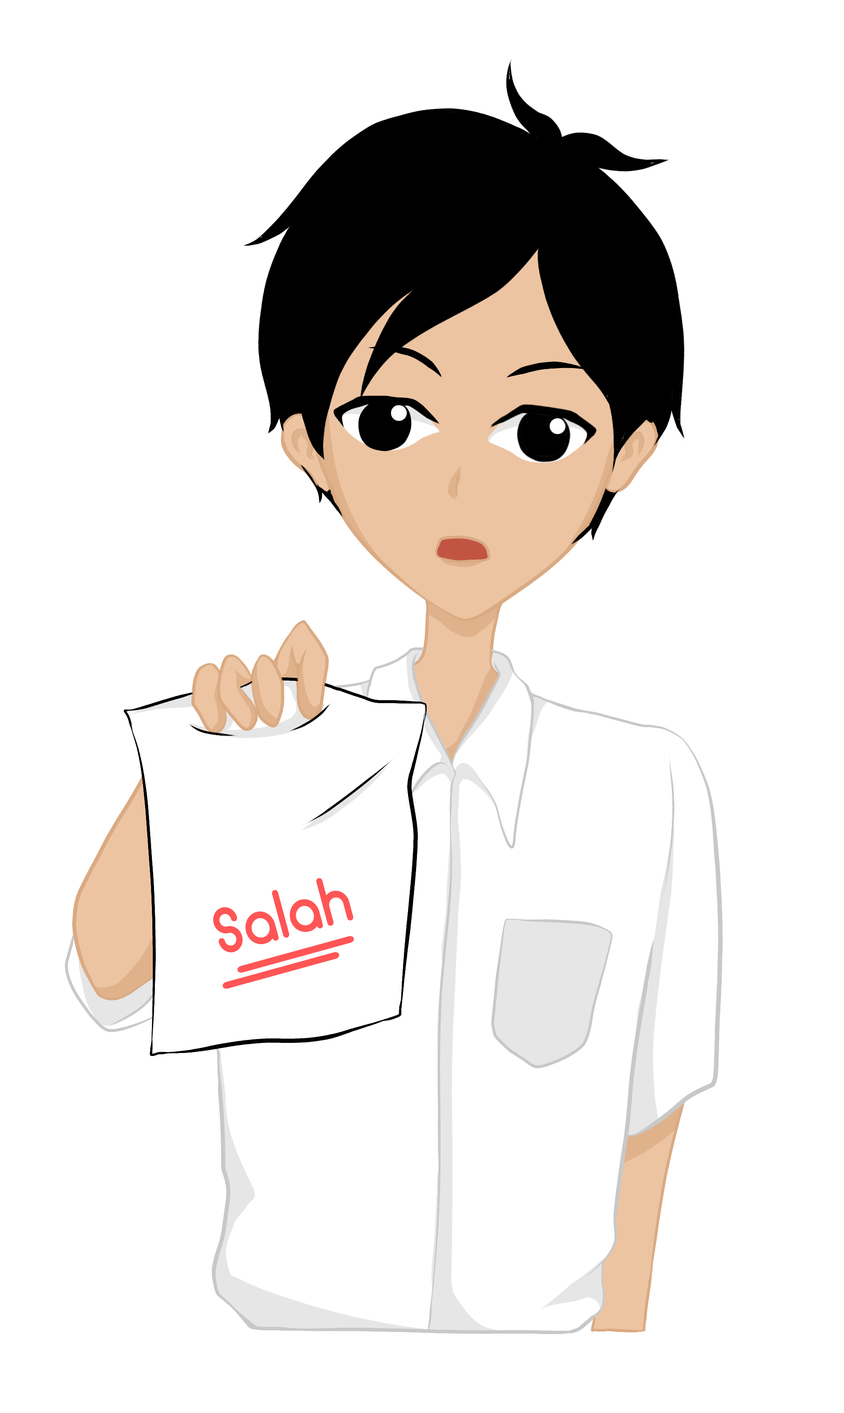
<style>
.page{position:relative;width:844px;height:1413px;background:#ffffff}
.page>*{position:absolute;margin:0}
.t1{font:65.2px "Arciform";color:#ff5555;font-weight:bold;scale:0.92 1}
</style>
<div class="page">
<p class="t1" style="left:213px;top:878px;width:140px;height:74px;rotate:-15deg">Salah</p>
</div>
